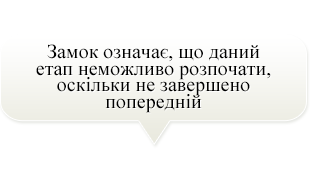
<style>
.page{position:relative;width:312px;height:170px;background:#ffffff}
.page>*{position:absolute;margin:0}
.t1{font:20px/16.7px "TimesNewRomanPSMT";color:#000000}
</style>
<div class="page">
<p class="t1" style="left:36px;top:44px;width:235px;height:69px;text-align:center">Замок означає, що даний етап неможливо розпочати, оскільки не завершено попередній</p>
</div>
